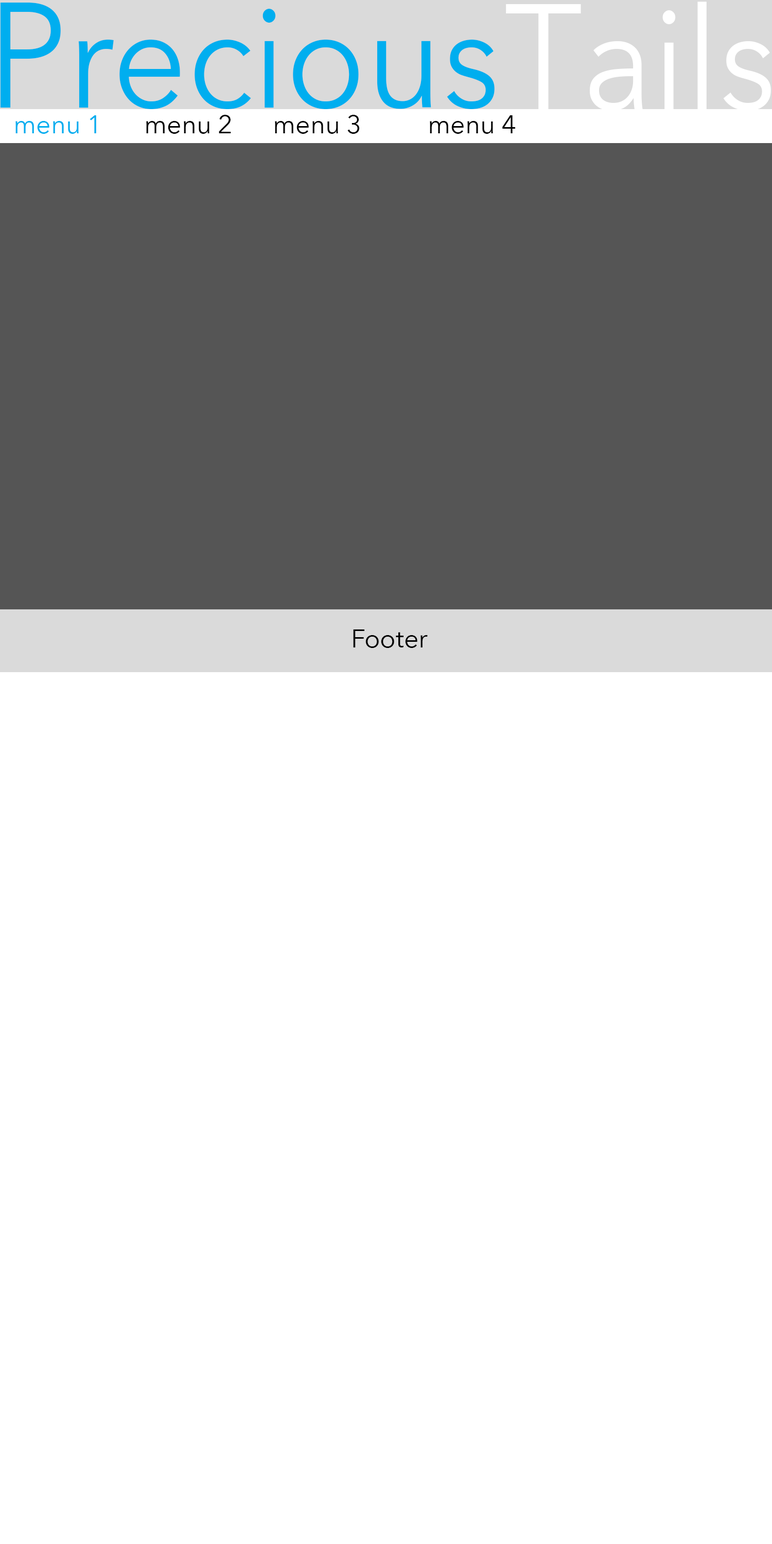
<style>
.page{position:relative;width:772px;height:1544px;background:#ffffff}
.page>*{position:absolute;margin:0}
.t1{font:141.9px "AvenirNext-Regular";color:#00aeef;scale:0.92 1}
.t2{font:148.3px "AvenirNext-Regular";color:#00aeef;scale:0.92 1}
.t3{font:141.9px "AvenirNext-Regular";color:#ffffff;scale:0.92 1}
.t4{font:148.3px "AvenirNext-Regular";color:#ffffff;scale:0.92 1}
.t5{font:25.7px "AvenirNext-Regular";color:#00aeef}
.t6{font:25.7px "AvenirNext-Regular";color:#000000}
</style>
<div class="page">
<p class="t1" style="left:0px;top:3px;width:495px;height:106px"><span class="t2">P</span>recious</p>
<p class="t3" style="left:506px;top:2px;width:265px;height:109px"><span class="t4">T</span>ails</p>
<p class="t5" style="left:15px;top:115px;width:81px;height:19px">menu 1</p>
<p class="t6" style="left:146px;top:115px;width:85px;height:19px">menu 2</p>
<p class="t6" style="left:275px;top:115px;width:84px;height:19px">menu 3</p>
<p class="t6" style="left:430px;top:115px;width:85px;height:19px">menu 4</p>
<p class="t6" style="left:353px;top:630px;width:75px;height:18px">Footer</p>
</div>
